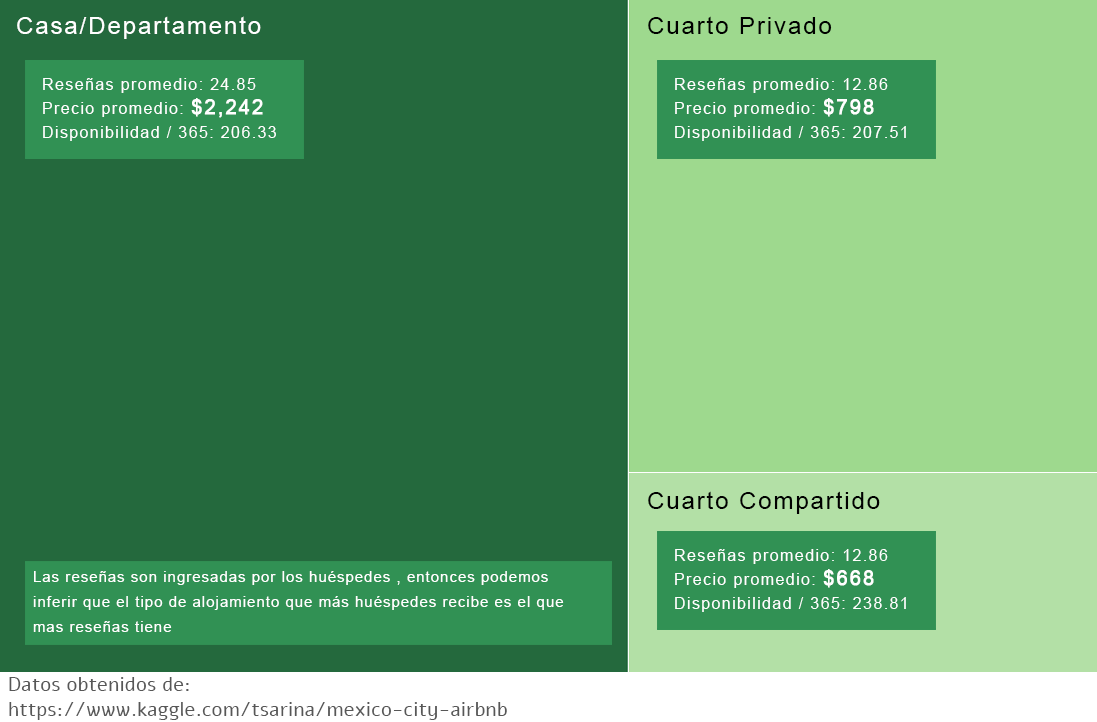
<style>
.page{position:relative;width:1097px;height:722px;background:#24693d}
.page>*{position:absolute;margin:0}
.t1{font:24px "ArialMT";letter-spacing:0.08em;color:#ffffff}
.t2{font:24px "ArialMT";letter-spacing:0.08em;color:#000000}
.t3{font:16.2px/24px "ArialMT";letter-spacing:0.08em;color:#ffffff}
.t4{font:20px/24px "ArialMT";letter-spacing:0.08em;color:#ffffff;font-weight:bold}
.t5{font:14.6px/25px "ArialMT";letter-spacing:0.08em;color:#ffffff}
.t6{font:20.3px "Alef-Regular";color:#575757}
</style>
<div class="page">
<p class="t1" style="left:17px;top:16px;width:244px;height:23px">Casa/Departamento</p>
<p class="t2" style="left:648px;top:16px;width:184px;height:18px">Cuarto Privado</p>
<p class="t3" style="left:43px;top:78px;width:233px;height:63px">Reseñas promedio: 24.85<br>Precio promedio: <span class="t4">$2,242<br></span>Disponibilidad / 365: 206.33</p>
<p class="t3" style="left:675px;top:78px;width:231px;height:63px">Reseñas promedio: 12.86<br>Precio promedio: <span class="t4">$798<br></span>Disponibilidad / 365: 207.51</p>
<p class="t2" style="left:648px;top:491px;width:232px;height:23px">Cuarto Compartido</p>
<p class="t3" style="left:675px;top:549px;width:231px;height:63px">Reseñas promedio: 12.86<br>Precio promedio: <span class="t4">$668<br></span>Disponibilidad / 365: 238.81</p>
<p class="t5" style="left:33px;top:571px;width:531px;height:61px">Las reseñas son ingresadas por los huéspedes , entonces podemos inferir que el tipo de alojamiento que más huéspedes recibe es el que mas reseñas tiene</p>
<p class="t6" style="left:9px;top:677px;width:498px;height:43px">Datos obtenidos de:<br>https://www.kaggle.com/tsarina/mexico-city-airbnb</p>
</div>
